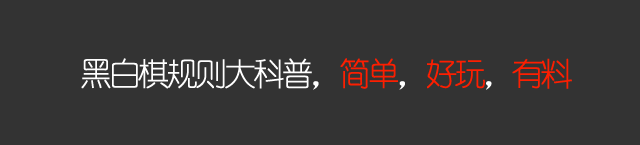
<style>
.page{position:relative;width:640px;height:145px;background:#333333}
.page>*{position:absolute;margin:0}
.t1{font:32px "YouYuan";letter-spacing:-0.1em;color:#ffffff}
.t2{font:32px "YouYuan";letter-spacing:-0.1em;color:#fd1e00}
</style>
<div class="page">
<p class="t1" style="left:81px;top:58px;width:491px;height:32px">黑白棋规则大科普，<span class="t2">简单</span>，<span class="t2">好玩</span>，<span class="t2">有料</span></p>
</div>
